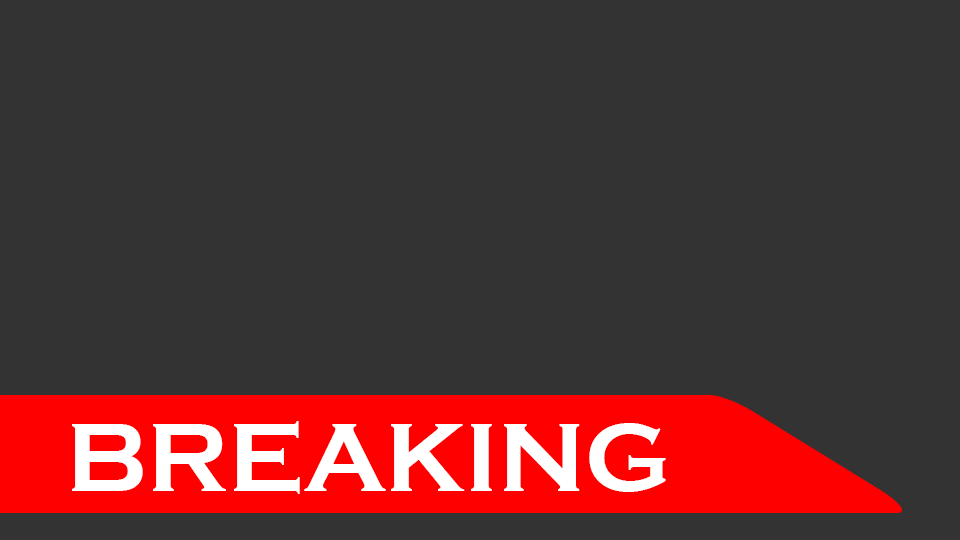
<style>
.page{position:relative;width:960px;height:540px;background:#333333}
.page>*{position:absolute;margin:0}
.t1{font:100px "CopperplateGothic-Bold";color:#ffffff}
.t2{font:100px "Consolas";color:#ffffff}
</style>
<div class="page">
<p class="t1" style="left:72px;top:421px;width:594px;height:73px"><span class="t2"> <br></span><br>BREAKING</p>
</div>
